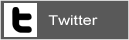
<style>
.page{position:relative;width:129px;height:40px;background:#595959}
.page>*{position:absolute;margin:0}
.t1{font:13.6px "ArialMT";color:#ffffff;scale:1.21 1}
</style>
<div class="page">
<p class="t1" style="left:48px;top:15px;width:50px;height:10px">Twitter</p>
</div>
